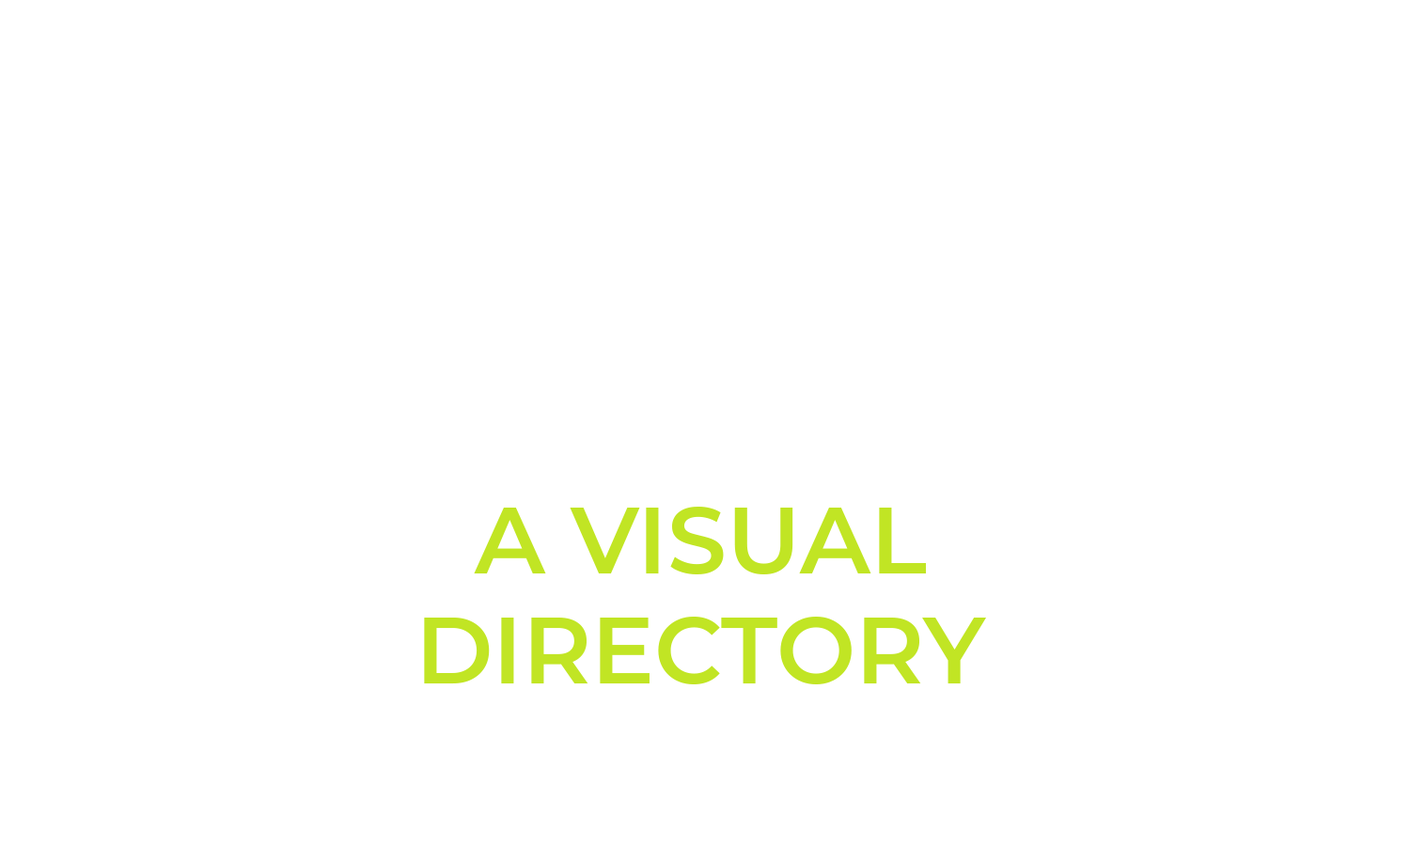
<style>
.page{position:relative;width:1410px;height:846px;background:#ffffff}
.page>*{position:absolute;margin:0}
.t1{font:94px/0.2px "Montserrat-SemiBold";color:#c1e524;text-transform:uppercase}
</style>
<div class="page">
<p class="t1" style="left:424px;top:507px;width:562px;height:177px;text-align:center">A Visual<br>directory</p>
</div>
